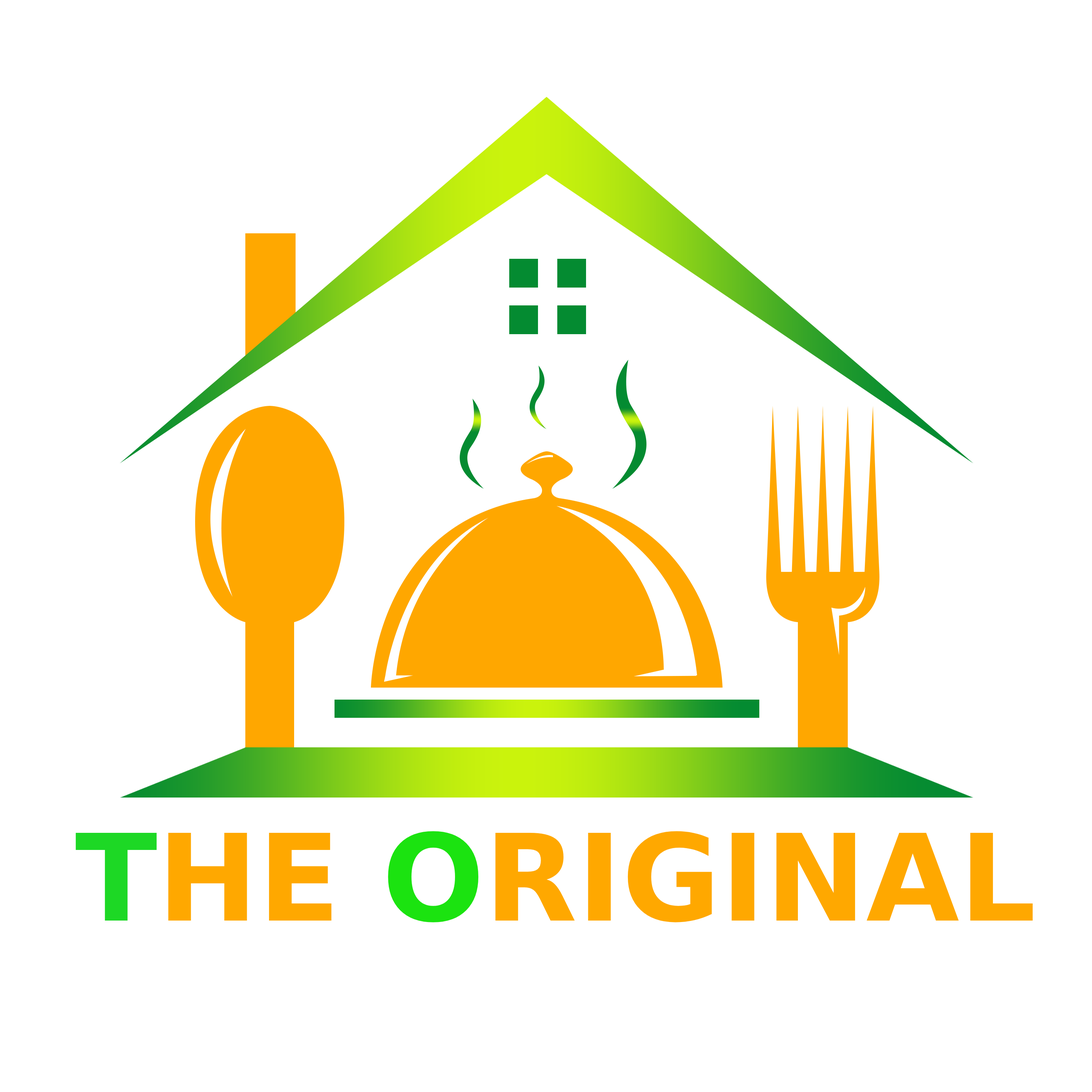
<style>
.page{position:relative;width:1092px;height:1092px;background:#ffffff}
.page>*{position:absolute;margin:0}
.t1{font:120.3px "ErasITC-Bold";color:#ffa800}
.t2{font:120.3px "ErasITC-Bold";color:#1dd825}
.t3{font:120.3px "ErasITC-Bold";color:#1be310}
</style>
<div class="page">
<p class="t1" style="left:76px;top:831px;width:957px;height:91px"><span class="t2">T</span>HE <span class="t3">O</span>RIGINAL</p>
</div>
